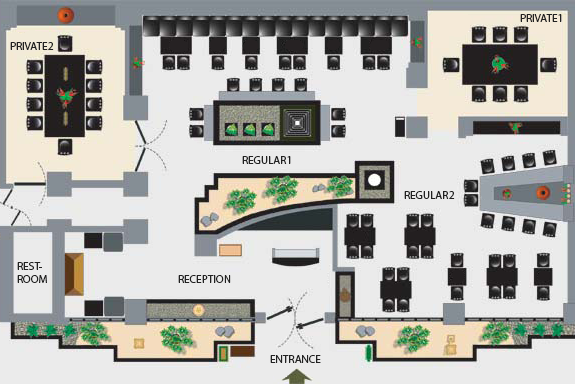
<style>
.page{position:relative;width:575px;height:384px;background:#ebebeb}
.page>*{position:absolute;margin:0}
.t1{font:11px "MyriadPro-Regular";color:#212121}
</style>
<div class="page">
<p class="t1" style="left:520px;top:14px;width:42px;height:8px">PRIVATE1</p>
<p class="t1" style="left:10px;top:42px;width:44px;height:8px">PRIVATE2</p>
<p class="t1" style="left:242px;top:156px;width:49px;height:8px">REGULAR1</p>
<p class="t1" style="left:404px;top:191px;width:51px;height:8px">REGULAR2</p>
<p class="t1" style="left:17px;top:262px;width:30px;height:21px">REST-<br>ROOM</p>
<p class="t1" style="left:178px;top:275px;width:53px;height:8px">RECEPTION</p>
<p class="t1" style="left:270px;top:355px;width:51px;height:8px">ENTRANCE</p>
</div>
